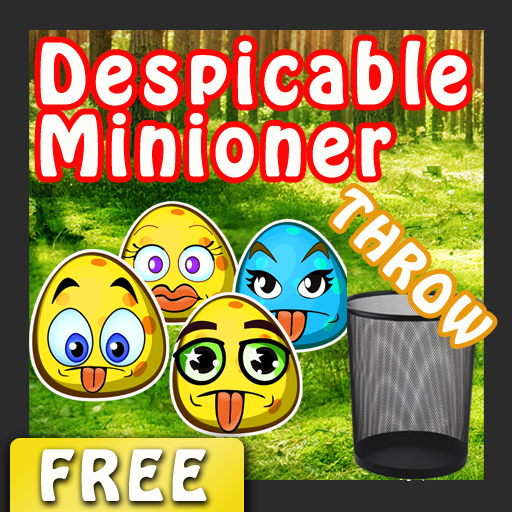
<style>
.page{position:relative;width:512px;height:512px}
.page>*{position:absolute;margin:0}
.t1{font:72px/72px "HoboStd";letter-spacing:0.1em;color:#fcfcf9;font-weight:bold}
.t2{font:48px "HoboStd";letter-spacing:0.1em;color:#fcfcf9;font-weight:bold}
.t3{font:60px "HoboStd";letter-spacing:0.1em;color:#fcfcf9;font-weight:bold}
</style>
<div class="page">
<p class="t1" style="left:40px;top:40px;width:427px;height:138px">Despicable Minioner</p>
<p class="t2" style="left:333px;top:188px;width:160px;height:156px;rotate:44deg">THROW</p>
<p class="t3" style="left:41px;top:449px;width:166px;height:52px">FREE</p>
</div>
